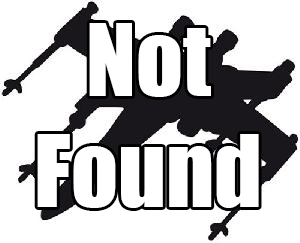
<style>
.page{position:relative;width:300px;height:243px;background:#ffffff}
.page>*{position:absolute;margin:0}
.t1{font:92px "Impact";color:#ffffff}
</style>
<div class="page">
<p class="t1" style="left:37px;top:23px;width:222px;height:185px;text-align:center">Not<br>Found</p>
</div>
